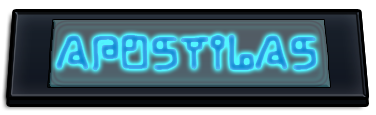
<style>
.page{position:relative;width:376px;height:115px}
.page>*{position:absolute;margin:0}
.t1{font:64px "LifeFormBB";color:#2f9ee1}
</style>
<div class="page">
<p class="t1" style="left:56px;top:35px;width:261px;height:36px">Apostilas</p>
</div>
